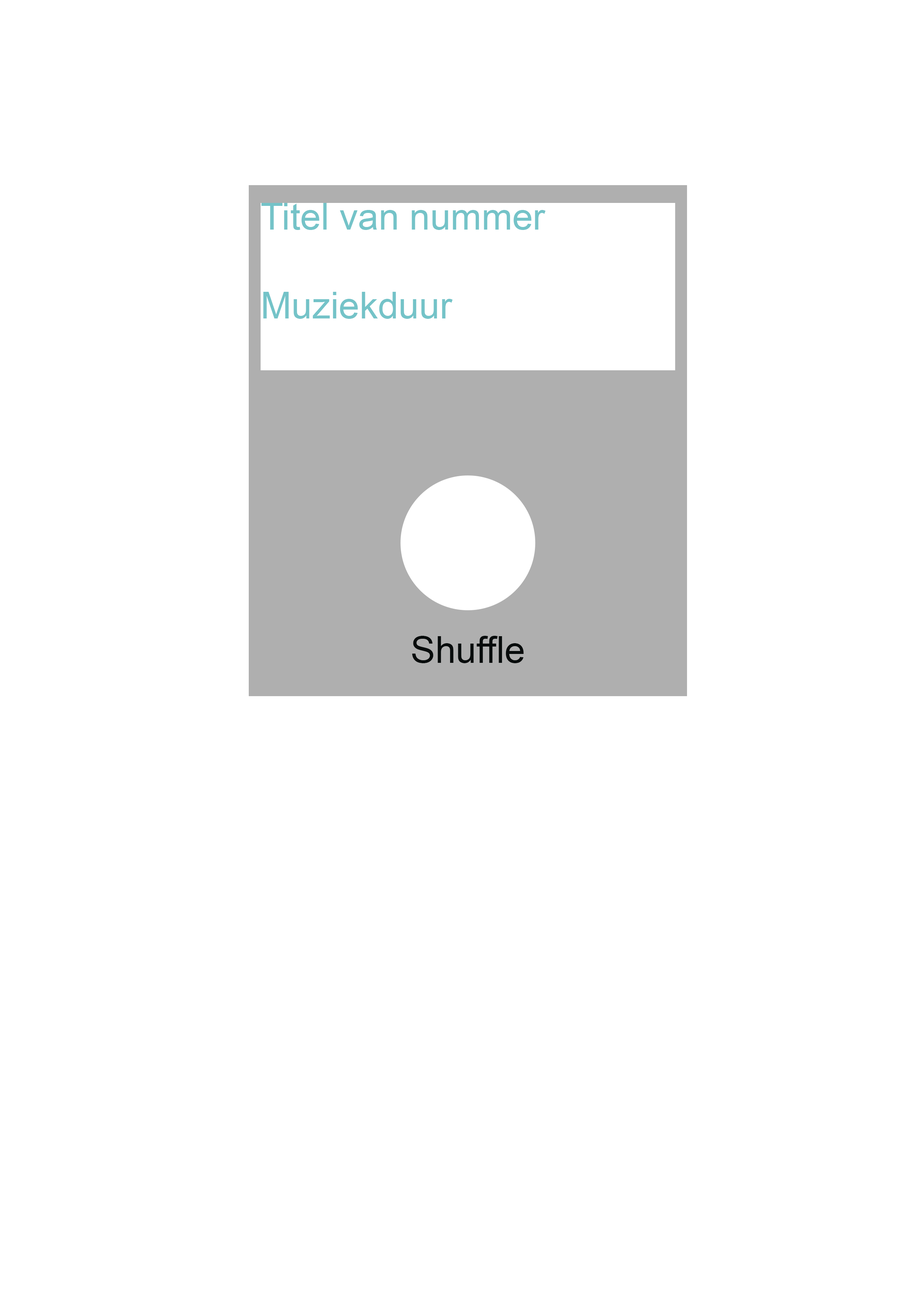
<style>
.page{position:relative;width:918px;height:1299px;background:#ffffff}
.page>*{position:absolute;margin:0}
.t1{font:37px "ArialMT";color:#74c3c8}
.t2{font:37px "ArialMT";color:#080c0c}
</style>
<div class="page">
<p class="t1" style="left:261px;top:203px;width:285px;height:116px">Titel van nummer<br><br>Muziekduur</p>
<p class="t2" style="left:412px;top:636px;width:112px;height:27px">Shuffle</p>
</div>
